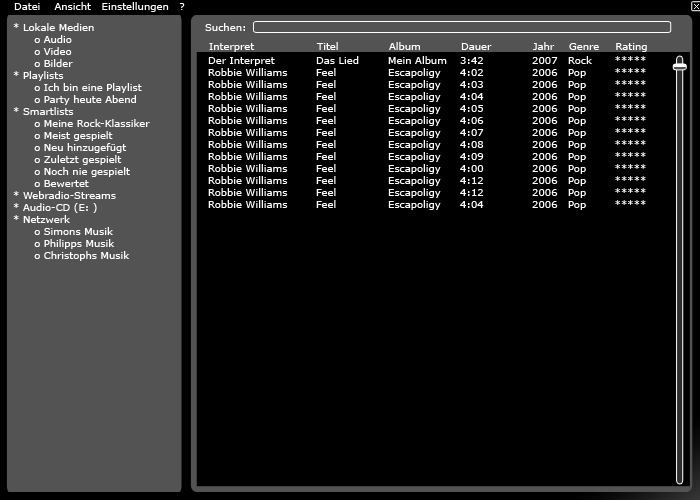
<style>
.page{position:relative;width:700px;height:500px;background:#000000}
.page>*{position:absolute;margin:0}
.t1{font:10px "Verdana";color:#ffffff}
</style>
<div class="page">
<p class="t1" style="left:14px;top:2px;width:171px;height:10px">Datei    Ansicht   Einstellungen   ?</p>
<p class="t1" style="left:13px;top:23px;width:137px;height:238px">* Lokale Medien<br>          o Audio<br>          o Video<br>          o Bilder <br>    * Playlists<br>          o Ich bin eine Playlist<br>          o Party heute Abend <br>    * Smartlists<br>          o Meine Rock-Klassiker<br>          o Meist gespielt<br>          o Neu hinzugefügt<br>          o Zuletzt gespielt<br>          o Noch nie gespielt<br>          o Bewertet <br>    * Webradio-Streams<br>    * Audio-CD (E: )<br>    * Netzwerk<br>          o Simons Musik<br>          o Philipps Musik<br>          o Christophs Musik</p>
<p class="t1" style="left:205px;top:23px;width:40px;height:8px">Suchen:</p>
<p class="t1" style="left:209px;top:42px;width:438px;height:10px">Interpret  Titel  Album  Dauer  Jahr Genre    Rating</p>
<p class="t1" style="left:208px;top:56px;width:438px;height:154px">Der Interpret  Das Lied Mein Album 3:42  2007 Rock    *****<br>Robbie Williams Feel  Escapoligy 4:02  2006 Pop    *****<br>Robbie Williams Feel  Escapoligy 4:03  2006 Pop    *****<br>Robbie Williams Feel  Escapoligy 4:04  2006 Pop    *****<br>Robbie Williams Feel  Escapoligy 4:05  2006 Pop    *****<br>Robbie Williams Feel  Escapoligy 4:06  2006 Pop    *****<br>Robbie Williams Feel  Escapoligy 4:07  2006 Pop    *****<br>Robbie Williams Feel  Escapoligy 4:08  2006 Pop    *****<br>Robbie Williams Feel  Escapoligy 4:09  2006 Pop    *****<br>Robbie Williams Feel  Escapoligy 4:00  2006 Pop    *****<br>Robbie Williams Feel  Escapoligy 4:12  2006 Pop    *****<br>Robbie Williams Feel  Escapoligy 4:12  2006 Pop    *****<br>Robbie Williams Feel  Escapoligy 4:04  2006 Pop    *****</p>
</div>
